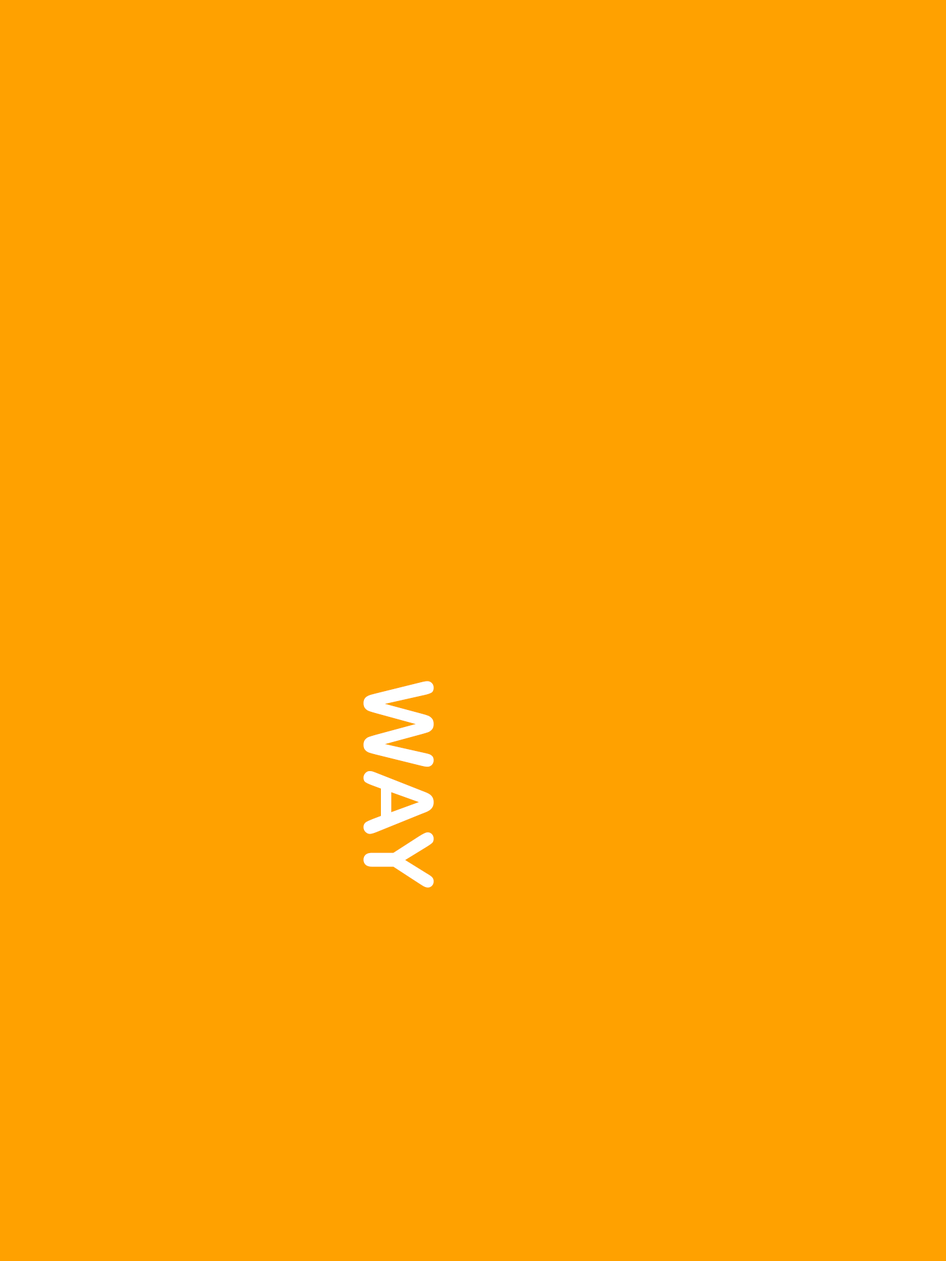
<style>
.page{position:relative;width:946px;height:1261px;background:#ffa100}
.page>*{position:absolute;margin:0}
.t1{font:94.6px "ArialRoundedMTBold";color:#ffffff}
</style>
<div class="page">
<p class="t1" style="left:363px;top:681px;width:71px;height:207px;rotate:90deg">WAY</p>
</div>
